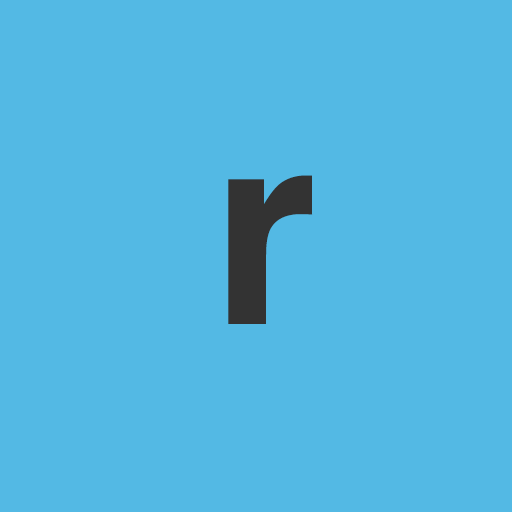
<style>
.page{position:relative;width:512px;height:512px;background:#53b9e4}
.page>*{position:absolute;margin:0}
.t1{font:272px "Helvetica-Bold";color:#333333}
</style>
<div class="page">
<p class="t1" style="left:228px;top:175px;width:85px;height:149px">r</p>
</div>
